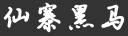
<style>
.page{position:relative;width:128px;height:36px;background:#333333}
.page>*{position:absolute;margin:0}
.t1{font:30px "LiDeBiao-Xing-3.0";letter-spacing:0.12em;color:#ffffff;font-weight:bold;scale:0.93 1}
</style>
<div class="page">
<p class="t1" style="left:3px;top:2px;width:122px;height:31px">仙寨黑马</p>
</div>
